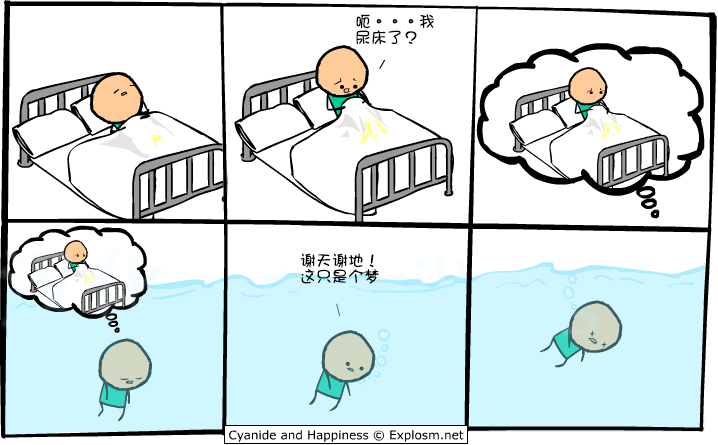
<style>
.page{position:relative;width:718px;height:445px;background:#ffffff}
.page>*{position:absolute;margin:0}
.t1{font:16px/16px "DFGirl";color:#000000}
</style>
<div class="page">
<p class="t1" style="left:356px;top:14px;width:78px;height:31px">呃。。。我<br>尿床了？</p>
<p class="t1" style="left:301px;top:253px;width:78px;height:31px">谢天谢地！<br>这只是个梦</p>
</div>
